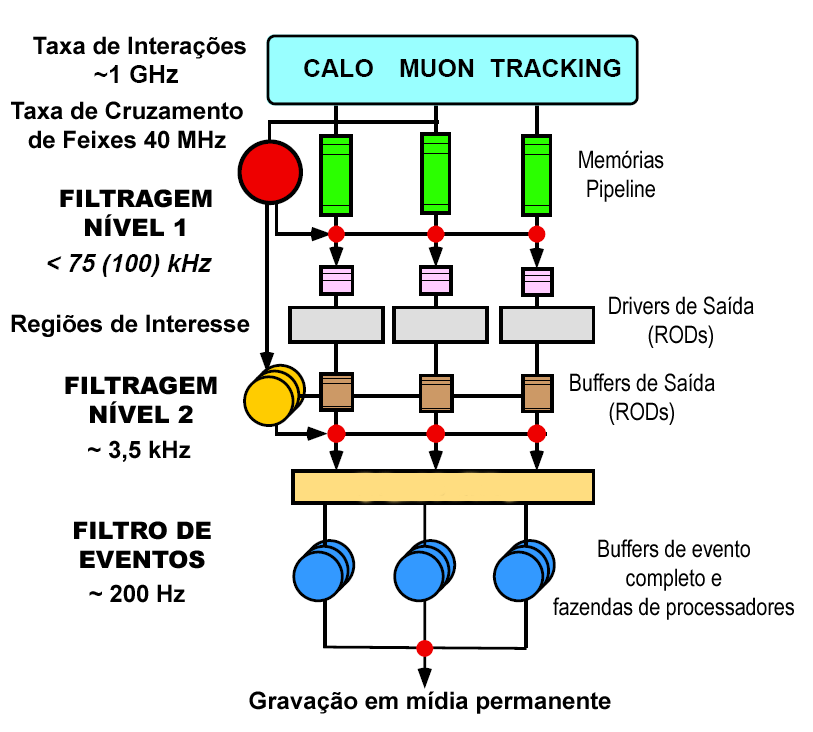
<style>
.page{position:relative;width:813px;height:732px;background:#ffffff}
.page>*{position:absolute;margin:0}
.t1{font:24px "Arial-BoldMT";color:#000000}
.t2{font:24px "ArialNarrow";color:#000000}
.t3{font:24px "Arial-Black";color:#000000}
</style>
<div class="page">
<p class="t1" style="left:33px;top:36px;width:213px;height:23px">Taxa de Interações</p>
<p class="t1" style="left:11px;top:101px;width:232px;height:48px;text-align:center">Taxa de Cruzamento<br>de Feixes 40 MHz</p>
<p class="t2" style="left:579px;top:150px;width:85px;height:52px;text-align:center">Memórias<br>Pipeline</p>
<p class="t3" style="left:60px;top:189px;width:152px;height:47px;text-align:center">FILTRAGEM<br>NÍVEL 1</p>
<p class="t2" style="left:609px;top:296px;width:145px;height:52px;text-align:center">Drivers de Saída<br>(RODs)</p>
<p class="t1" style="left:11px;top:314px;width:239px;height:23px">Regiões de Interesse</p>
<p class="t3" style="left:65px;top:376px;width:152px;height:47px;text-align:center">FILTRAGEM<br>NÍVEL 2</p>
<p class="t2" style="left:570px;top:373px;width:145px;height:52px;text-align:center">Buffers de Saída<br>(RODs)</p>
<p class="t1" style="left:88px;top:440px;width:103px;height:22px">~ 3,5 kHz</p>
<p class="t3" style="left:74px;top:521px;width:137px;height:48px;text-align:center">FILTRO DE <br>EVENTOS</p>
<p class="t2" style="left:553px;top:539px;width:241px;height:81px;text-align:center">Buffers de evento <br>completo e <br>fazendas de processadores</p>
<p class="t1" style="left:89px;top:584px;width:96px;height:19px">~ 200 Hz</p>
<p class="t1" style="left:249px;top:691px;width:362px;height:23px">Gravação em mídia permanente</p>
</div>
